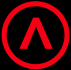
<style>
.page{position:relative;width:71px;height:70px;background:#000000}
.page>*{position:absolute;margin:0}
.t1{font:78.6px "ArialMT";letter-spacing:0.1em;color:#f80013}
</style>
<div class="page">
<p class="t1" style="left:19px;top:17px;width:34px;height:32px">^</p>
</div>
